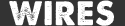
<style>
.page{position:relative;width:125px;height:26px;background:#333333}
.page>*{position:absolute;margin:0}
.t1{font:36px "ALoveofThunder";color:#ffffff}
</style>
<div class="page">
<p class="t1" style="left:9px;top:0px;width:105px;height:26px">wires</p>
</div>
